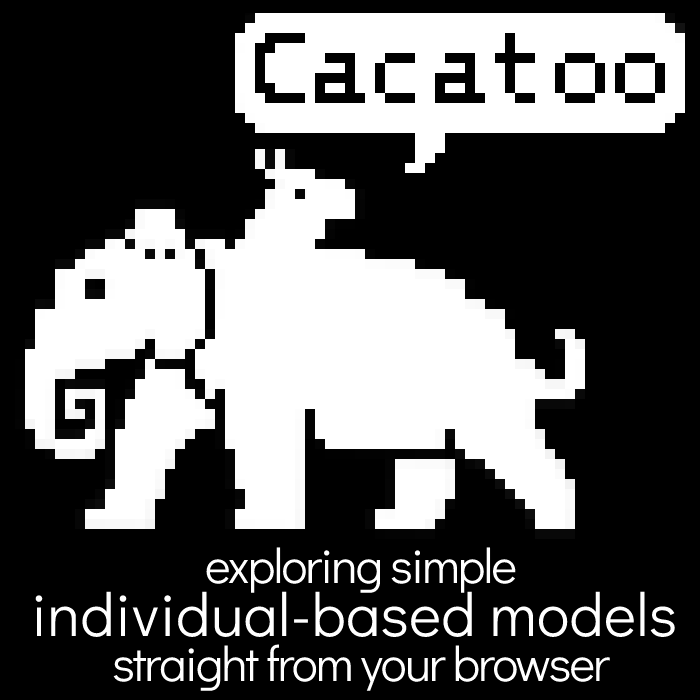
<style>
.page{position:relative;width:700px;height:700px;background:#000000}
.page>*{position:absolute;margin:0}
.t1{font:49px/53px "DidactGothic-Regular";letter-spacing:-0.04em;color:#ffffff}
.t2{font:49px/40px "DidactGothic-Regular";letter-spacing:-0.04em;color:#ffffff}
.t3{font:61px/44px "DidactGothic-Regular";letter-spacing:0.004em;color:#ffffff}
</style>
<div class="page">
<p class="t1" style="left:35px;top:547px;width:640px;height:144px;text-align:center"><span class="t2">exploring simple<br></span><span class="t3">individual-based models <br></span>straight from your browser</p>
</div>
